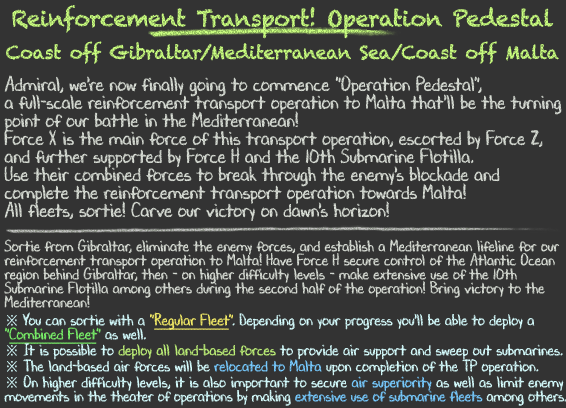
<style>
.page{position:relative;width:566px;height:408px;background:#333333}
.page>*{position:absolute;margin:0}
.t1{font:18px/36px "Chalkduster";letter-spacing:-0.02em}
.t2{font:22px/36px "Chalkduster";letter-spacing:-0.02em}
.t3{font:20px/18px "DJBChalkItUp";color:#d9ded6;scale:0.9 1}
.t4{font:16px/14px "DJBChalkItUp";color:#d9ded6;scale:0.9 1}
.t5{font:16px/18px "DJBChalkItUp";color:#d9ded6;scale:0.9 1}
.t6{font:16px/14px "TimesNewRomanPSMT";color:#d7feff;scale:0.9 1}
.t7{font:16px/14px "DJBChalkItUp";color:#d7feff;scale:0.9 1}
.t8{font:16px/14px "DJBChalkItUp";color:#f5ed68;scale:0.9 1}
.t9{font:16px/14px "DJBChalkItUp";color:#f5ed68;text-decoration:underline;scale:0.9 1}
.t10{font:16px/16px "DJBChalkItUp";color:#7bf26b;scale:0.9 1}
.t11{font:16px/16px "DJBChalkItUp";color:#7bf26b;text-decoration:underline;scale:0.9 1}
.t12{font:16px/16px "DJBChalkItUp";color:#d7feff;scale:0.9 1}
.t13{font:16px/16px "TimesNewRomanPSMT";color:#d7feff;scale:0.9 1}
.t14{font:16px/16px "DJBChalkItUp";color:#bdef78;scale:0.9 1}
.t15{font:16px/16px "DJBChalkItUp";color:#78cbff;scale:0.9 1}
.t16{font:16px/14px "DJBChalkItUp";color:#78cbff;scale:0.9 1}
.t17{font:16px/14px "DJBChalkItUp";letter-spacing:-0.01em;color:#d7feff;scale:0.9 1}
.t18{font:16px/14px "DJBChalkItUp";letter-spacing:-0.01em;color:#78cbff;scale:0.9 1}
</style>
<div class="page">
<p class="t1" style="left:6px;top:5px;width:553px;height:59px;text-align:center"><span class="t2">Reinforcement Transport! Operation Pedestal<br></span>Coast off Gibraltar/Mediterranean Sea/Coast off Malta</p>
<p class="t3" style="left:4px;top:75px;width:563px;height:331px">Admiral, we're now finally going to commence "Operation Pedestal",<br>a full-scale reinforcement transport operation to Malta that'll be the turning<br>point of our battle in the Mediterranean!<br>Force X is the main force of this transport operation, escorted by Force Z,<br>and further supported by Force H and the 10th Submarine Flotilla.<br>Use their combined forces to break through the enemy's blockade and<br>complete the reinforcement transport operation towards Malta!<br>All fleets, sortie! Carve our victory on dawn's horizon!<br><br><span class="t4">Sortie from Gibraltar, eliminate the enemy forces, and establish a Mediterranean lifeline for our<br>reinforcement transport operation to Malta! Have Force H secure control of the Atlantic Ocean<br>region behind Gibraltar, then - on higher difficulty levels - make extensive use of the 10th<br>Submarine Flotilla among others during the second half of the operation! Bring victory to the<br></span><span class="t5">Mediterranean!<br></span><span class="t6">※ </span><span class="t7">You can sortie with a </span><span class="t8">"</span><span class="t9">Regular Fleet</span><span class="t8">"</span><span class="t7">. Depending on your progress you'll be able to deploy a<br></span><span class="t10">"</span><span class="t11">Combined Fleet</span><span class="t10">"</span><span class="t12"> as well.<br></span><span class="t13">※</span><span class="t12"> It is possible to </span><span class="t14">deploy all land-based forces</span><span class="t12"> to provide air support and sweep out submarines.<br></span><span class="t13">※</span><span class="t12"> The land-based air forces will be </span><span class="t15">relocated to Malta</span><span class="t12"> upon completion of the TP operation.<br></span><span class="t6">※</span><span class="t7"> On higher difficulty levels, it is also important to secure </span><span class="t16">air superiority </span><span class="t7">as well as limit enemy<br></span><span class="t17">movements in the theater of operations by making </span><span class="t18">extensive use of submarine fleets</span><span class="t17"> among others.</span></p>
</div>
